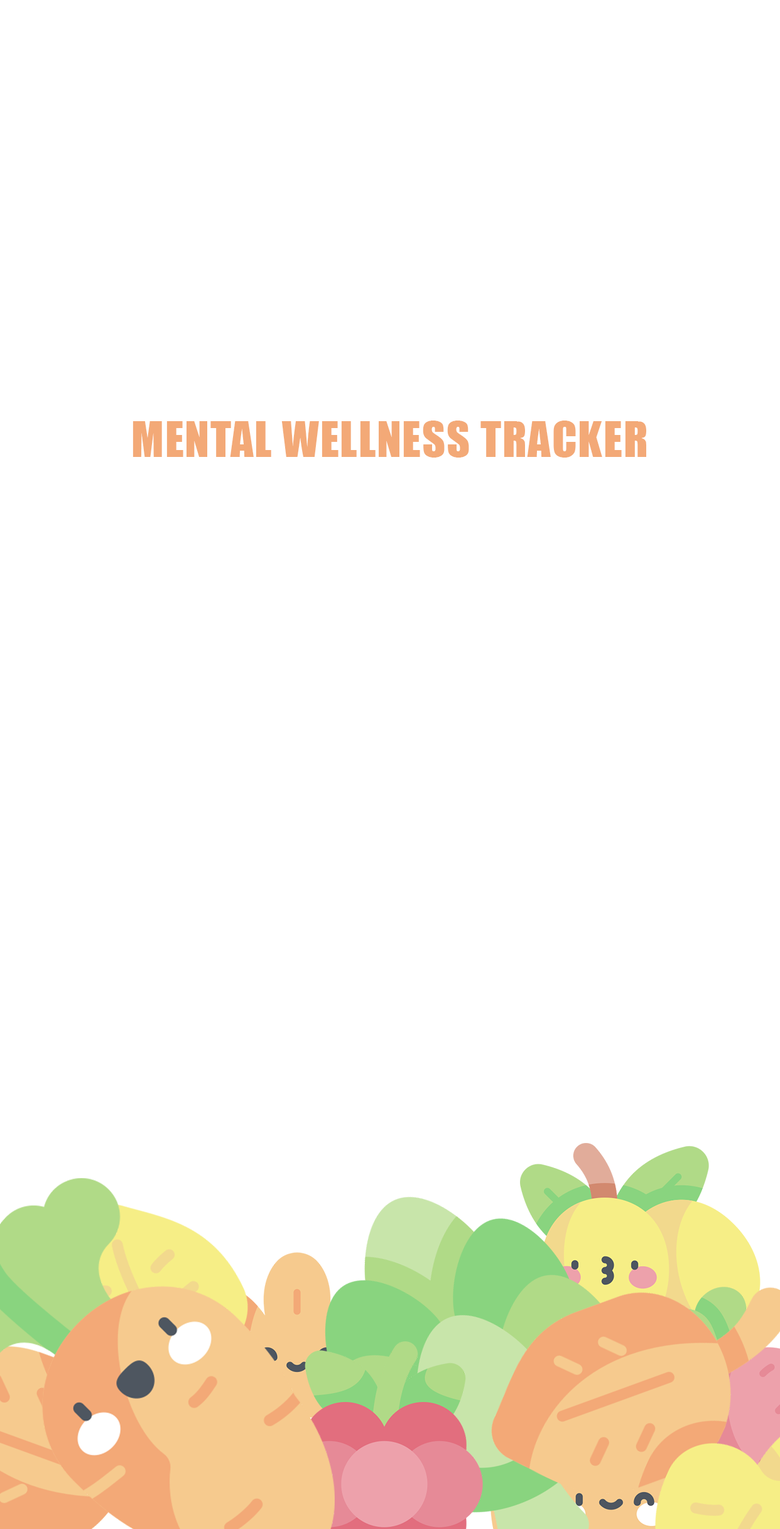
<style>
.page{position:relative;width:780px;height:1529px;background:#ffffff}
.page>*{position:absolute;margin:0}
.t1{font:45.2px "Impact";letter-spacing:0.025em;color:#f3a977}
</style>
<div class="page">
<p class="t1" style="left:132px;top:421px;width:514px;height:37px">MENTAL WELLNESS TRACKER</p>
</div>
